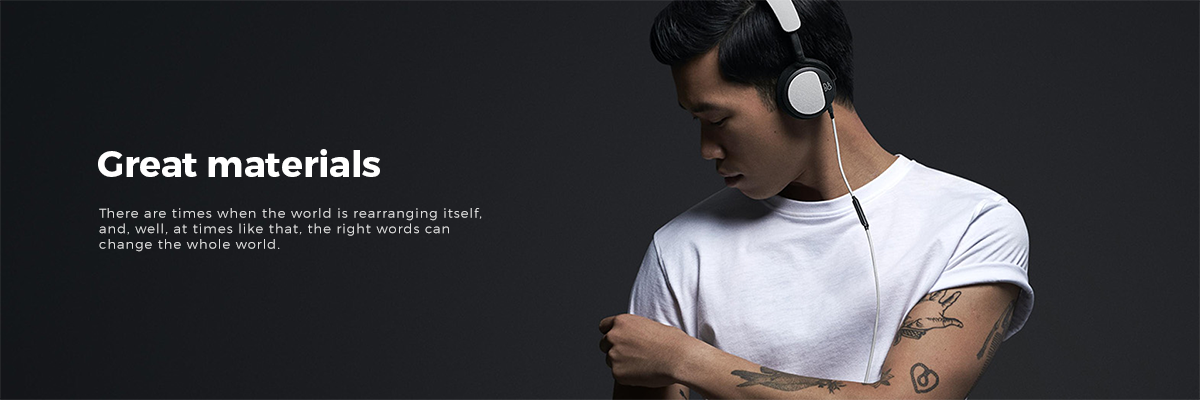
<style>
.page{position:relative;width:1200px;height:400px}
.page>*{position:absolute;margin:0}
.t1{font:36px "Montserrat-Bold";color:#ffffff}
.t2{font:13px "Montserrat-Light";letter-spacing:0.08em;color:#dfdfdf}
</style>
<div class="page">
<p class="t1" style="left:98px;top:149px;width:282px;height:28px">Great materials</p>
<p class="t2" style="left:99px;top:208px;width:383px;height:44px">There are times when the world is rearranging itself, and, well, at times like that, the right words can change the whole world.</p>
</div>
